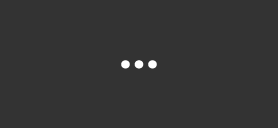
<style>
.page{position:relative;width:278px;height:128px;background:#333333}
.page>*{position:absolute;margin:0}
.t1{font:50px "ProductSans-Bold";color:#ffffff}
</style>
<div class="page">
<p class="t1" style="left:121px;top:60px;width:36px;height:9px">...</p>
</div>
